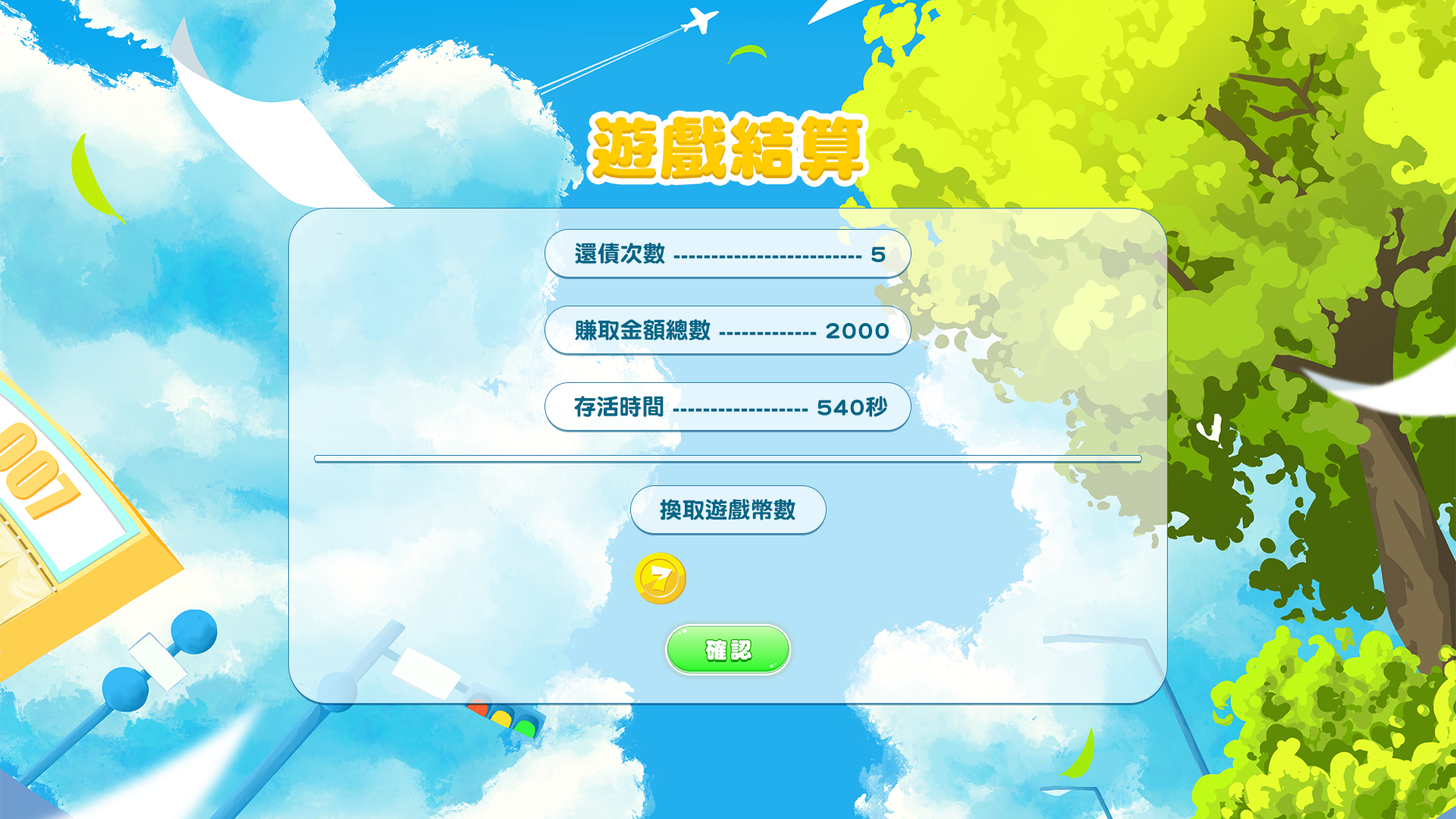
<style>
.page{position:relative;width:1456px;height:819px}
.page>*{position:absolute;margin:0}
.t1{font:69px "DFYuan-W12-WIN-BF";color:#ffcc00}
.t2{font:22.7px "DFNYuan-W9-WINP-BF";color:#036686}
</style>
<div class="page">
<p class="t1" style="left:592px;top:116px;width:271px;height:65px">遊戲結算</p>
<p class="t2" style="left:575px;top:243px;width:311px;height:21px">還債次數 ------------------------- 5</p>
<p class="t2" style="left:575px;top:319px;width:314px;height:21px">賺取金額總數 ------------- 2000</p>
<p class="t2" style="left:574px;top:396px;width:313px;height:21px">存活時間 ------------------ 540秒</p>
<p class="t2" style="left:660px;top:499px;width:135px;height:21px">換取遊戲幣數</p>
</div>
